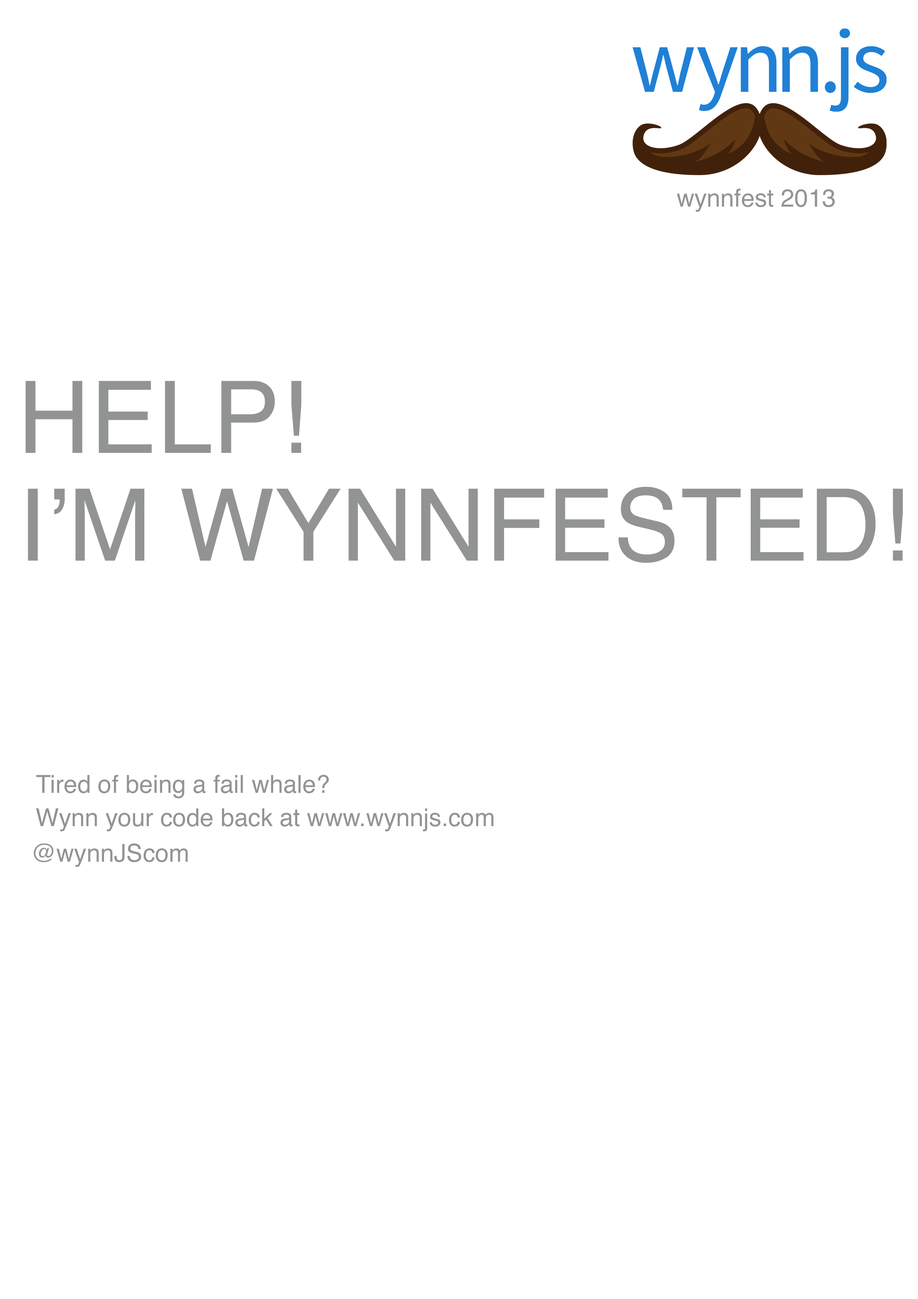
<style>
.page{position:relative;width:918px;height:1299px;background:#ffffff}
.page>*{position:absolute;margin:0}
.t1{font:24.7px "Helvetica";color:#929494}
.t2{font:100.3px "Helvetica";color:#929494}
</style>
<div class="page">
<p class="t1" style="left:677px;top:188px;width:158px;height:24px">wynnfest 2013</p>
<p class="t2" style="left:26px;top:381px;width:275px;height:72px">HELP!</p>
<p class="t2" style="left:28px;top:486px;width:875px;height:77px">I’M WYNNFESTED!</p>
<p class="t1" style="left:36px;top:775px;width:293px;height:23px">Tired of being a fail whale?</p>
<p class="t1" style="left:36px;top:808px;width:458px;height:23px">Wynn your code back at www.wynnjs.com</p>
<p class="t1" style="left:34px;top:843px;width:154px;height:24px">@wynnJScom</p>
</div>
